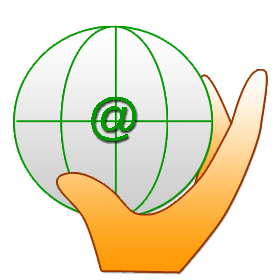
<style>
.page{position:relative;width:280px;height:280px;background:#ffffff}
.page>*{position:absolute;margin:0}
.t1{font:51.6px "ArialMT";color:#009900}
</style>
<div class="page">
<p class="t1" style="left:91px;top:96px;width:45px;height:45px">@</p>
</div>
